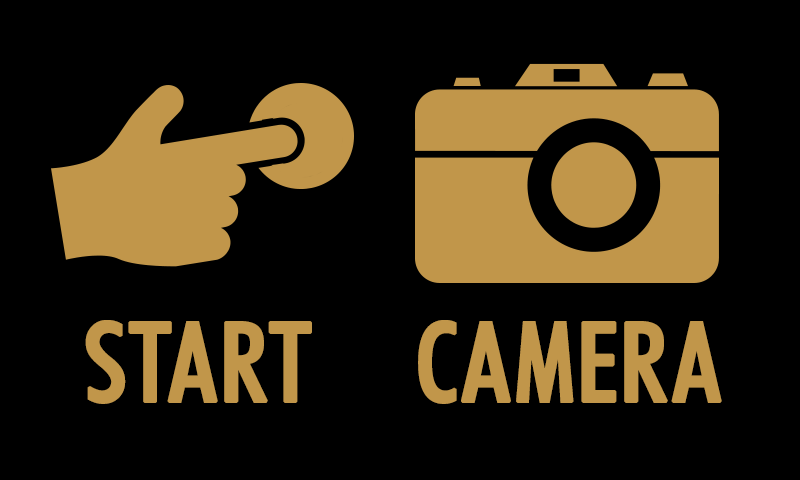
<style>
.page{position:relative;width:800px;height:480px;background:#000000}
.page>*{position:absolute;margin:0}
.t1{font:110.5px "FuturaBT-MediumCondensed";color:#c1964a;font-weight:bold}
</style>
<div class="page">
<p class="t1" style="left:85px;top:320px;width:227px;height:84px">START</p>
<p class="t1" style="left:418px;top:320px;width:304px;height:84px">CAMERA</p>
</div>
